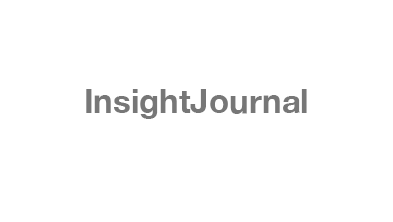
<style>
.page{position:relative;width:393px;height:222px;background:#ffffff}
.page>*{position:absolute;margin:0}
.t1{font:33px "HelveticaNeue-Bold";color:#777777}
</style>
<div class="page">
<p class="t1" style="left:86px;top:89px;width:221px;height:30px">InsightJournal</p>
</div>
